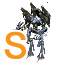
<style>
.page{position:relative;width:64px;height:64px;background:#ffffff}
.page>*{position:absolute;margin:0}
.t1{font:36px "ArialMT";color:#f7941d;font-weight:bold}
</style>
<div class="page">
<p class="t1" style="left:4px;top:31px;width:22px;height:28px">S</p>
</div>
